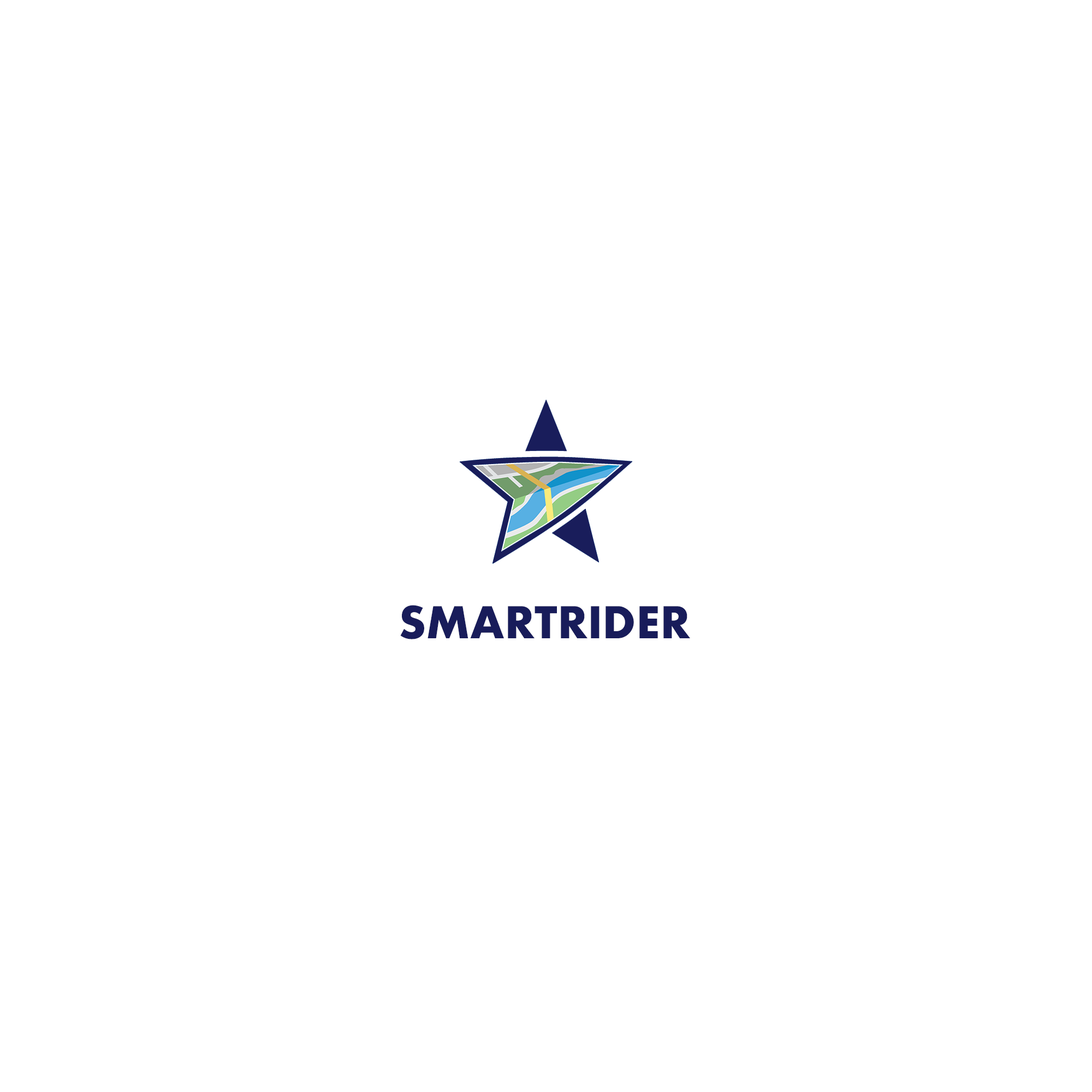
<style>
.page{position:relative;width:1092px;height:1092px;background:#ffffff}
.page>*{position:absolute;margin:0}
.t1{font:42.6px "Futura-Bold";color:#181c5a}
</style>
<div class="page">
<p class="t1" style="left:400px;top:605px;width:290px;height:34px">SMARTRIDER</p>
</div>
